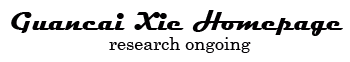
<style>
.page{position:relative;width:350px;height:62px;background:#ffffff}
.page>*{position:absolute;margin:0}
.t1{font:26px "Magneto-Bold";color:#010001}
.t2{font:18px "Century";color:#020003}
</style>
<div class="page">
<p class="t1" style="left:11px;top:10px;width:332px;height:26px">Guancai Xie Homepage</p>
<p class="t2" style="left:109px;top:37px;width:142px;height:16px">research ongoing</p>
</div>
